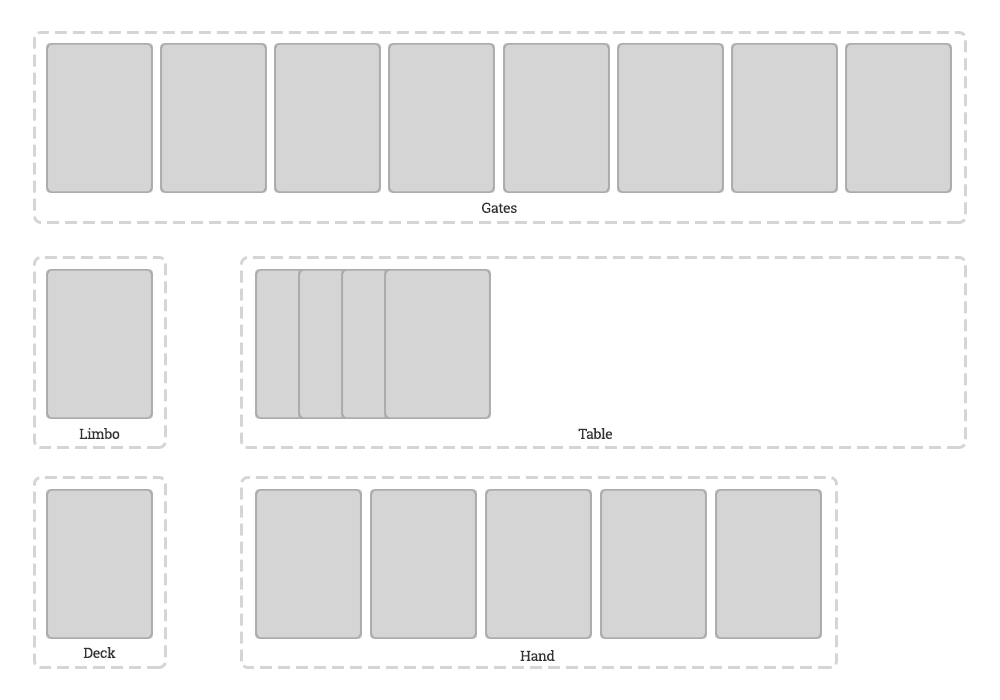
<style>
.page{position:relative;width:1000px;height:700px;background:#ffffff}
.page>*{position:absolute;margin:0}
.t1{font:14px "RobotoSlab-Regular";letter-spacing:-0.025em;color:#333333}
</style>
<div class="page">
<p class="t1" style="left:482px;top:202px;width:35px;height:11px">Gates</p>
<p class="t1" style="left:79px;top:428px;width:41px;height:11px">Limbo</p>
<p class="t1" style="left:578px;top:428px;width:34px;height:11px">Table</p>
<p class="t1" style="left:83px;top:647px;width:33px;height:11px">Deck</p>
<p class="t1" style="left:520px;top:650px;width:35px;height:11px">Hand</p>
</div>
